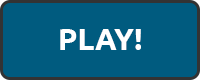
<style>
.page{position:relative;width:200px;height:80px;background:#005b7f}
.page>*{position:absolute;margin:0}
.t1{font:30px "Ubuntu-Bold";color:#ffffff}
</style>
<div class="page">
<p class="t1" style="left:60px;top:29px;width:81px;height:21px">PLAY!</p>
</div>
